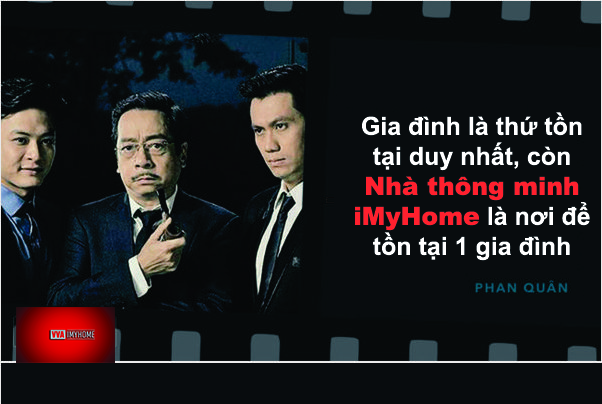
<style>
.page{position:relative;width:602px;height:404px;background:#080c0e}
.page>*{position:absolute;margin:0}
.t1{font:25px "Arial-BoldMT";color:#ffffff}
.t2{font:25px "Arial-Black";color:#ff202e}
</style>
<div class="page">
<p class="t1" style="left:355px;top:112px;width:235px;height:149px;text-align:center">Gia đình là thứ tồn tại duy nhất, còn <span class="t2">Nhà thông minh iMyHome</span> là nơi để tồn tại 1 gia đình</p>
</div>
